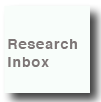
<style>
.page{position:relative;width:101px;height:102px;background:#f8fdfa}
.page>*{position:absolute;margin:0}
.t1{font:14px/18px "Helvetica-Bold";letter-spacing:0.075em;color:#7d7676}
</style>
<div class="page">
<p class="t1" style="left:8px;top:39px;width:69px;height:28px">Research <br>Inbox</p>
</div>
